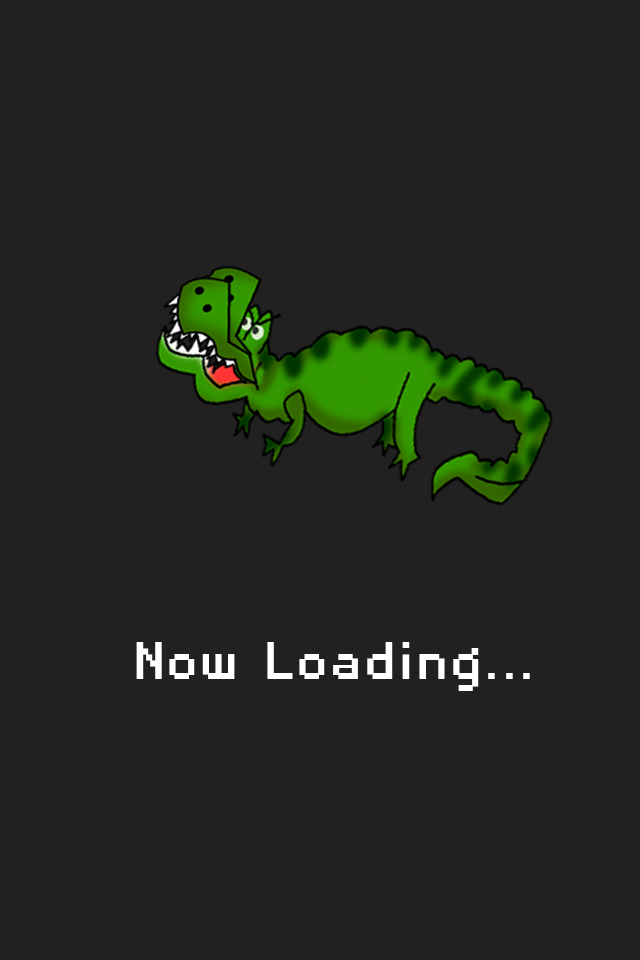
<style>
.page{position:relative;width:640px;height:960px;background:#212121}
.page>*{position:absolute;margin:0}
.t1{font:69.7px "DisposableDroidBB";color:#ffffff}
</style>
<div class="page">
<p class="t1" style="left:136px;top:642px;width:394px;height:49px">Now Loading...</p>
</div>
